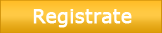
<style>
.page{position:relative;width:162px;height:33px}
.page>*{position:absolute;margin:0}
.t1{font:18.7px "Verdana";color:#ffffff;font-weight:bold}
</style>
<div class="page">
<p class="t1" style="left:33px;top:9px;width:99px;height:19px">Registrate</p>
</div>
